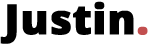
<style>
.page{position:relative;width:148px;height:44px;background:#ffffff}
.page>*{position:absolute;margin:0}
.t1{font:41.4px "OpenSans-Extrabold";color:#000000;font-weight:bold}
.t2{font:41.4px "OpenSans-Extrabold";color:#c24f4f;font-weight:bold}
</style>
<div class="page">
<p class="t1" style="left:0px;top:1px;width:148px;height:43px">Justin<span class="t2">.</span></p>
</div>
